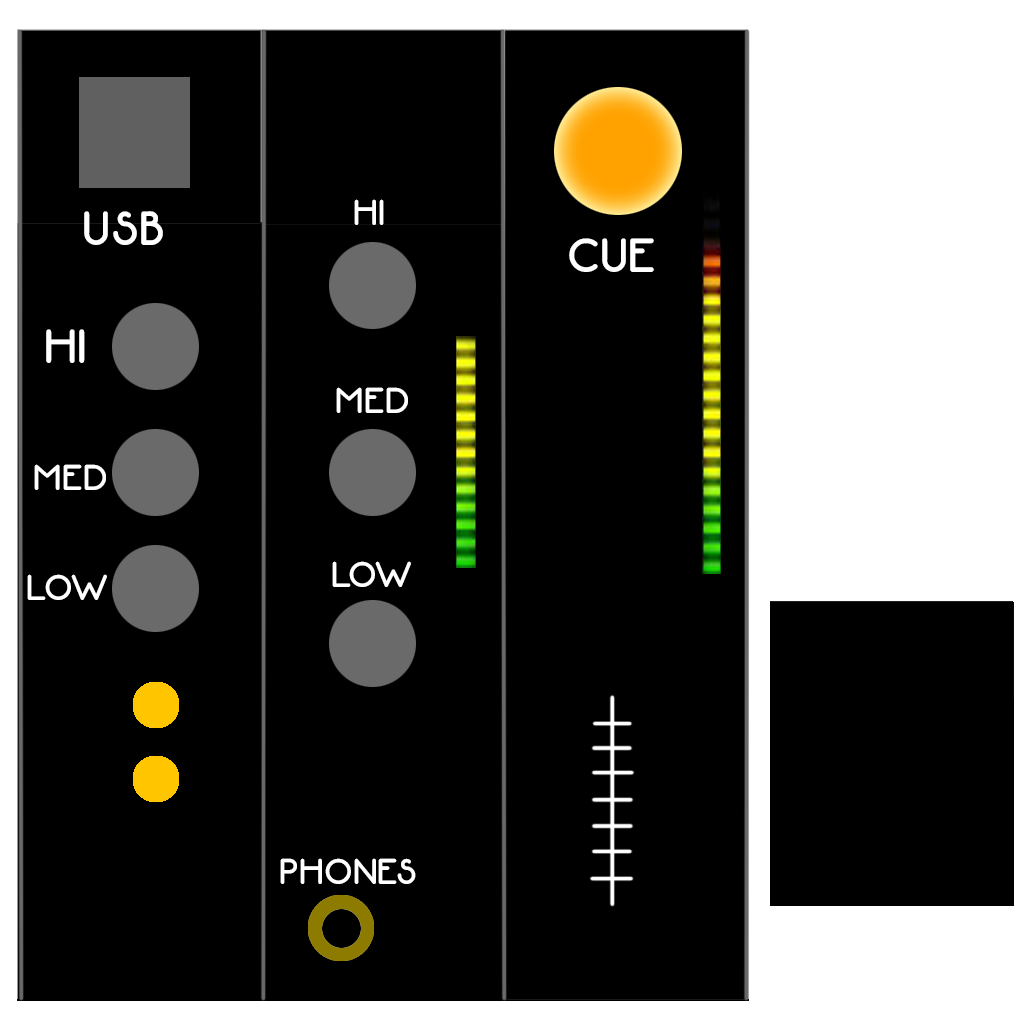
<style>
.page{position:relative;width:1024px;height:1024px;background:#000000}
.page>*{position:absolute;margin:0}
.t1{font:36px "Neon80s";color:#ffffff}
.t2{font:48px "Neon80s";color:#ffffff}
</style>
<div class="page">
<p class="t1" style="left:354px;top:199px;width:30px;height:26px">HI</p>
<p class="t2" style="left:84px;top:211px;width:79px;height:34px">USB</p>
<p class="t2" style="left:569px;top:238px;width:85px;height:34px">CUE</p>
<p class="t2" style="left:46px;top:329px;width:39px;height:34px">HI</p>
<p class="t1" style="left:336px;top:387px;width:72px;height:26px">MED</p>
<p class="t1" style="left:34px;top:464px;width:72px;height:26px">MED</p>
<p class="t1" style="left:332px;top:561px;width:79px;height:26px">LOW</p>
<p class="t1" style="left:27px;top:574px;width:80px;height:26px">LOW</p>
<p class="t1" style="left:280px;top:858px;width:136px;height:26px">PHONES</p>
</div>
